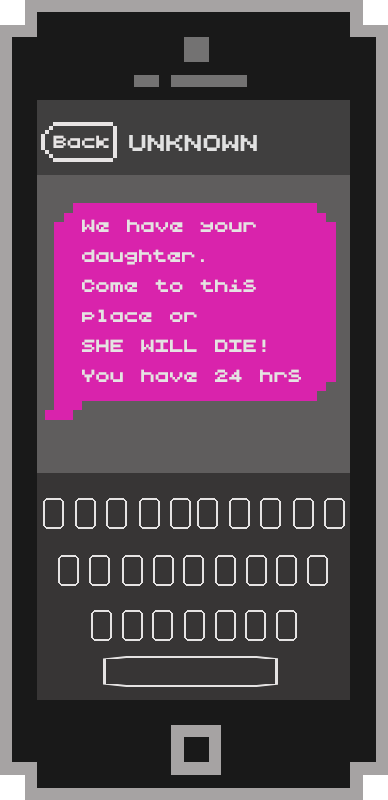
<style>
.page{position:relative;width:388px;height:800px;background:#191919}
.page>*{position:absolute;margin:0}
.t1{font:20px "LilliputSteps-Regular";color:#e7e4e4}
.t2{font:26px "LilliputSteps-Regular";color:#e1e1e1}
.t3{font:20px/30px "LilliputSteps-Regular";color:#e5e3e3}
</style>
<div class="page">
<p class="t1" style="left:53px;top:135px;width:56px;height:13px">Back</p>
<p class="t2" style="left:129px;top:135px;width:128px;height:16px">UNKNOWN</p>
<p class="t3" style="left:82px;top:219px;width:219px;height:163px">We have your daughter.<br>Come to this place or <br>SHE WILL DIE!<br>You have 24 hrs</p>
</div>
